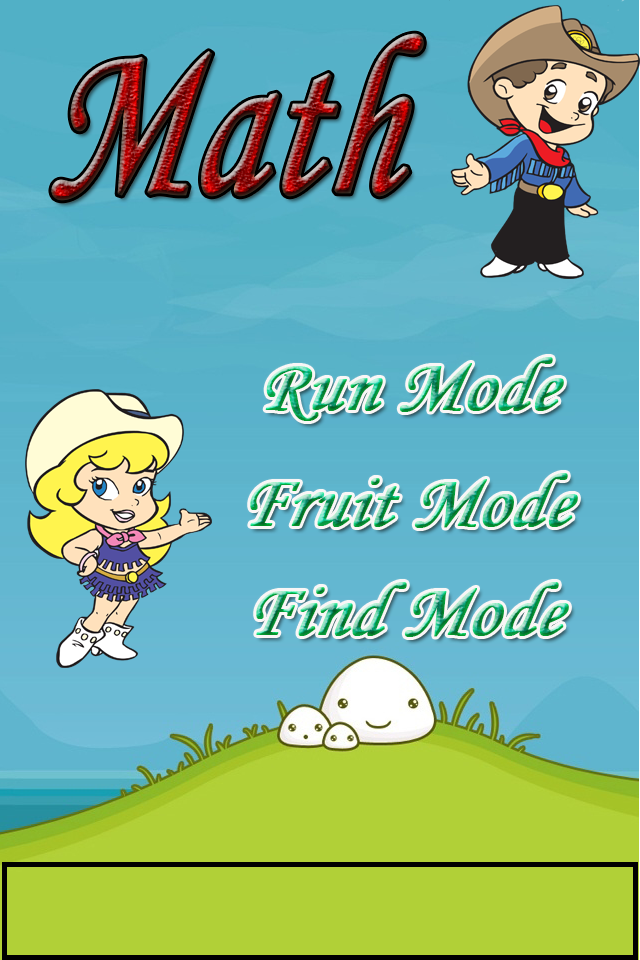
<style>
.page{position:relative;width:640px;height:960px}
.page>*{position:absolute;margin:0}
.t1{font:225px "MonotypeCorsiva";font-weight:bold;font-style:italic;scale:0.74 1}
.t2{font:75px "MonotypeCorsiva";font-weight:bold;font-style:italic}
</style>
<div class="page">
<p class="t1" style="left:51px;top:33px;width:373px;height:168px">Math</p>
<p class="t2" style="left:265px;top:357px;width:299px;height:64px">Run Mode</p>
<p class="t2" style="left:250px;top:473px;width:328px;height:55px">Fruit Mode</p>
<p class="t2" style="left:256px;top:582px;width:313px;height:55px">Find Mode</p>
</div>
